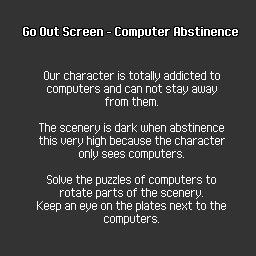
<style>
.page{position:relative;width:256px;height:256px;background:#333333}
.page>*{position:absolute;margin:0}
.t1{font:8px "FFFExecutiveBold";color:#ffffff}
.t2{font:8px/13px "FFFExecutive";color:#ffffff}
</style>
<div class="page">
<p class="t1" style="left:23px;top:27px;width:215px;height:11px">Go Out Screen - Computer Abstinence</p>
<p class="t2" style="left:37px;top:71px;width:189px;height:154px;text-align:center">Our character is totally addicted to <br>computers and can not stay away from them.<br><br>The scenery is dark when abstinence this very high because the character only sees computers.<br><br>Solve the puzzles of computers to rotate parts of the scenery.<br>Keep an eye on the plates next to the computers.</p>
</div>
